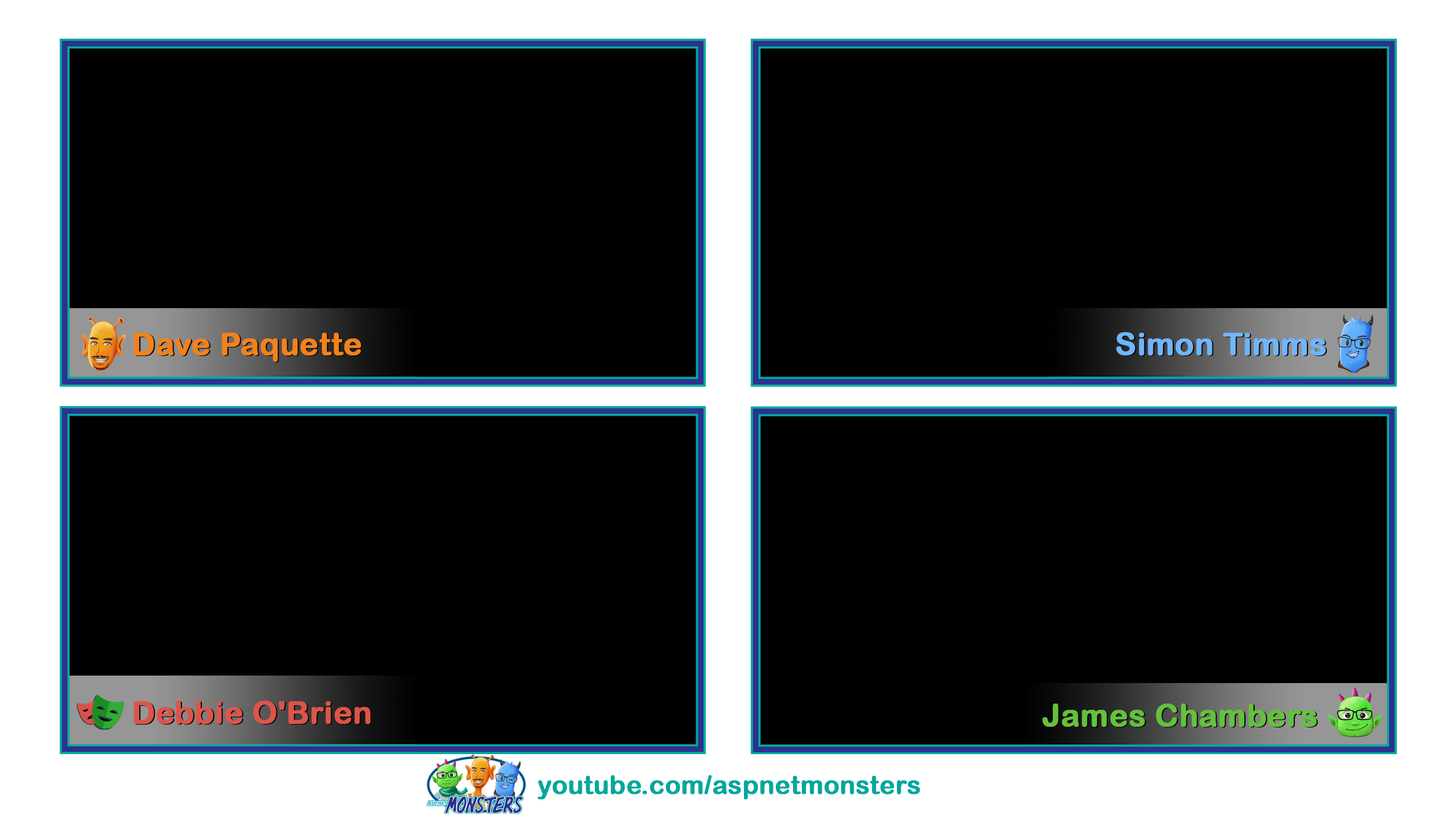
<style>
.page{position:relative;width:1456px;height:819px;background:#000000}
.page>*{position:absolute;margin:0}
.t1{font:31.3px "ArialRoundedMTBold";color:#f1821c;font-weight:bold}
.t2{font:31.3px "ArialRoundedMTBold";color:#70b5fb;font-weight:bold}
.t3{font:31.3px "ArialRoundedMTBold";color:#dc554a;font-weight:bold}
.t4{font:31.3px "ArialRoundedMTBold";color:#64c13c;font-weight:bold}
.t5{font:25.4px "ArialRoundedMTBold";color:#00a89d;font-weight:bold}
</style>
<div class="page">
<p class="t1" style="left:134px;top:333px;width:227px;height:29px">Dave Paquette</p>
<p class="t2" style="left:1116px;top:332px;width:210px;height:23px">Simon Timms</p>
<p class="t3" style="left:134px;top:701px;width:237px;height:23px">Debbie O'Brien</p>
<p class="t4" style="left:1043px;top:704px;width:274px;height:23px">James Chambers</p>
<p class="t5" style="left:537px;top:775px;width:383px;height:25px">youtube.com/aspnetmonsters</p>
</div>
